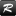
<style>
.page{position:relative;width:16px;height:16px}
.page>*{position:absolute;margin:0}
.t1{font:12px "BrushScriptStd";color:#ffffff}
</style>
<div class="page">
<p class="t1" style="left:3px;top:3px;width:10px;height:10px">R</p>
</div>
